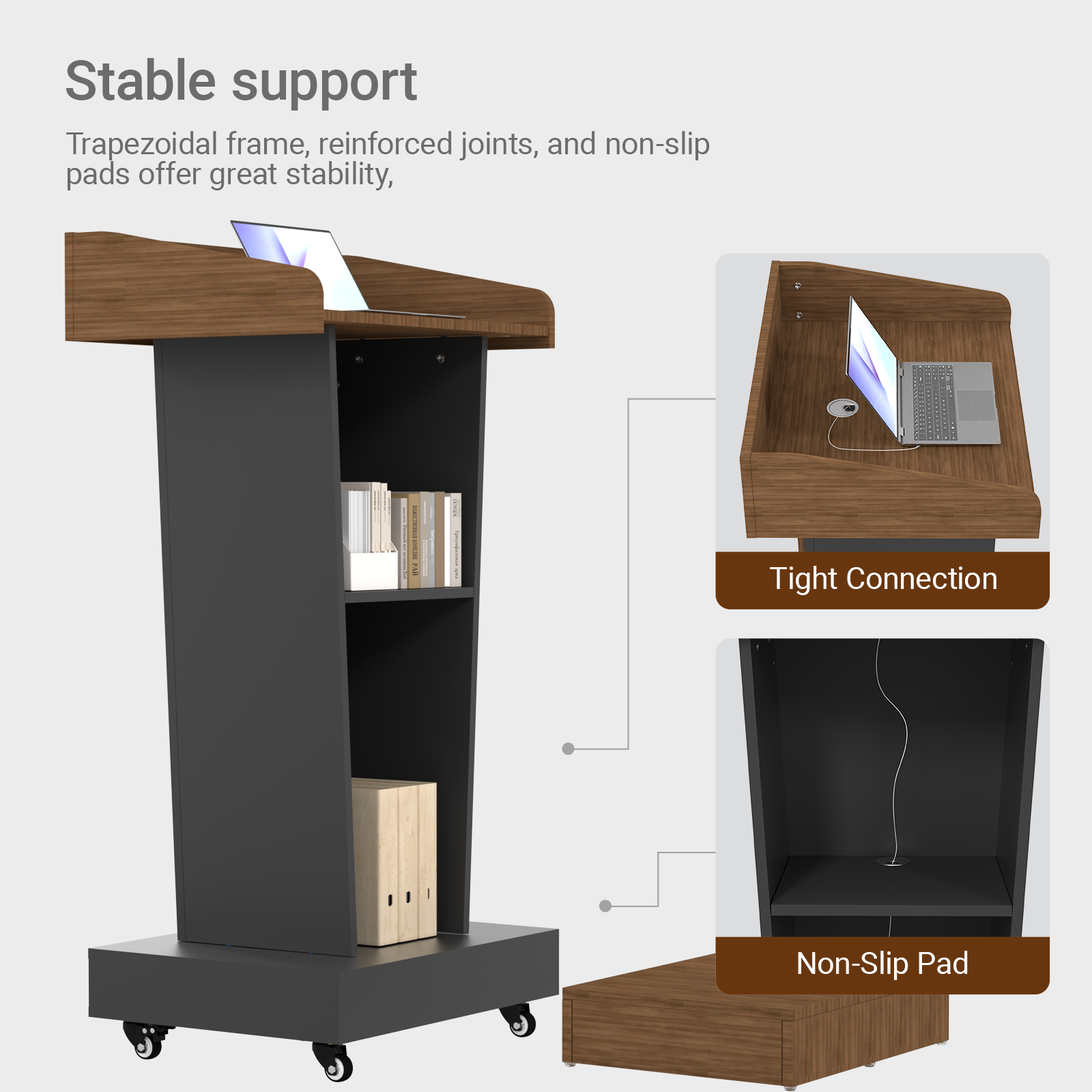
<style>
.page{position:relative;width:1092px;height:1092px;background:#ececec}
.page>*{position:absolute;margin:0}
.t1{font:55.3px "Roboto-Medium";color:#6c6c6c}
.t2{font:30.6px/30.6px "Roboto-Regular";color:#6c6c6c}
.t3{font:30.6px "Roboto-Regular";color:#ffffff}
</style>
<div class="page">
<p class="t1" style="left:66px;top:58px;width:351px;height:53px">Stable support</p>
<p class="t2" style="left:66px;top:131px;width:644px;height:59px">Trapezoidal frame, reinforced joints, and non-slip<br>pads offer great stability,</p>
<p class="t3" style="left:770px;top:566px;width:226px;height:29px">Tight Connection</p>
<p class="t3" style="left:798px;top:951px;width:170px;height:29px">Non-Slip Pad</p>
</div>
